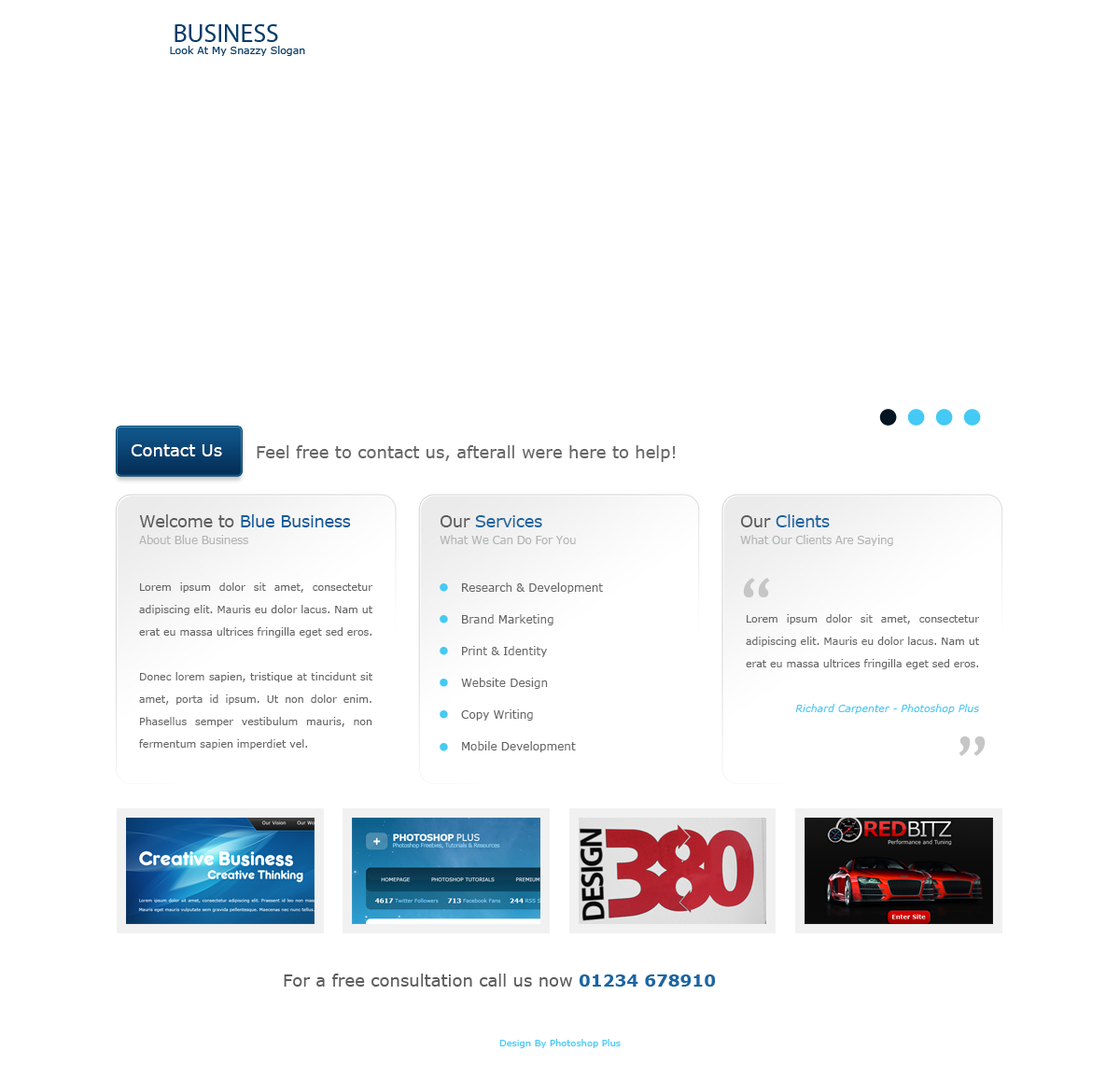
<style>
.page{position:relative;width:1120px;height:1065px;background:#ffffff}
.page>*{position:absolute;margin:0}
.t1{font:16.8px "Verdana";color:#ffffff}
.t2{font:26.1px "MyriadPro-Regular";color:#ffffff}
.t3{font:26.1px "MyriadPro-Regular";color:#083d69}
.t4{font:16.8px "Verdana-Bold";color:#ffffff}
.t5{font:10.3px "Verdana";color:#083d69}
.t6{font:16.8px "Verdana";color:#676767}
.t7{font:11.2px/16.8px "Verdana";letter-spacing:-0.025em;color:#b3b4b4}
.t8{font:16.8px/16.8px "Verdana";letter-spacing:-0.025em;color:#5d5d5d}
.t9{font:16.8px/16.8px "Verdana";letter-spacing:-0.025em;color:#0d5b9b}
.t10{font:16.8px/16.8px "Verdana";letter-spacing:-0.025em;color:#1c65a1}
.t11{font:67.2px "TrebuchetMS";letter-spacing:-0.025em;color:#c6c6c6}
.t12{font:10.3px/22.4px "Verdana";color:#676767}
.t13{font:11.2px/31.7px "Verdana";color:#676767}
.t14{font:10.3px/22.4px "Verdana-Italic";color:#45c9f5}
.t15{font:16.8px "Verdana";color:#5d5d5d}
.t16{font:16.8px "Verdana-Bold";color:#1c65a1}
.t17{font:10.3px/16.8px "Verdana";color:#ffffff}
.t18{font:9.3px/16.8px "Verdana";color:#45c9f5}
</style>
<div class="page">
<p class="t1" style="left:119px;top:24px;width:806px;height:18px"><span class="t2">BLUE</span><span class="t3">BUSINESS                                     </span>For a free consultations call us now <span class="t4">01234 678910</span></p>
<p class="t5" style="left:170px;top:46px;width:135px;height:10px">Look At My Snazzy Slogan</p>
<p class="t1" style="left:131px;top:444px;width:91px;height:12px">Contact Us</p>
<p class="t6" style="left:257px;top:445px;width:419px;height:17px">Feel free to contact us, afterall were here to help!</p>
<p class="t7" style="left:139px;top:514px;width:212px;height:30px"><span class="t8">Welcome to </span><span class="t9">Blue Business<br></span>About Blue Business</p>
<p class="t7" style="left:440px;top:515px;width:136px;height:29px"><span class="t8">Our </span><span class="t10">Services<br></span>What We Can Do For You</p>
<p class="t7" style="left:740px;top:514px;width:153px;height:32px"><span class="t8">Our </span><span class="t10">Clients<br></span>What Our Clients Are Saying</p>
<p class="t11" style="left:743px;top:578px;width:27px;height:19px">“</p>
<p class="t12" style="left:139px;top:582px;width:234px;height:167px;text-align:justify">Lorem ipsum dolor sit amet, consectetur adipiscing elit. Mauris eu dolor lacus. Nam ut erat eu massa ultrices fringilla eget sed eros. <br><br>Donec lorem sapien, tristique at tincidunt sit amet, porta id ipsum. Ut non dolor enim. Phasellus semper vestibulum mauris, non fermentum sapien imperdiet vel.</p>
<p class="t13" style="left:461px;top:582px;width:142px;height:170px;text-align:justify">Research &amp; Development<br>Brand Marketing<br>Print &amp; Identity<br>Website Design<br>Copy Writing<br>Mobile Development</p>
<p class="t12" style="left:746px;top:614px;width:234px;height:100px;text-align:justify">Lorem ipsum dolor sit amet, consectetur adipiscing elit. Mauris eu dolor lacus. Nam ut erat eu massa ultrices fringilla eget sed eros.<br><br><span class="t14">Richard Carpenter - Photoshop Plus</span></p>
<p class="t11" style="left:958px;top:736px;width:27px;height:20px;rotate:180deg">“</p>
<p class="t15" style="left:284px;top:973px;width:431px;height:13px">For a free consultation call us now <span class="t16">01234 678910</span></p>
<p class="t17" style="left:431px;top:1021px;width:258px;height:27px;text-align:center">Copyright BlueBusiness 2011, All Rights Reserved<br><span class="t18">Design By Photoshop Plus</span></p>
</div>
